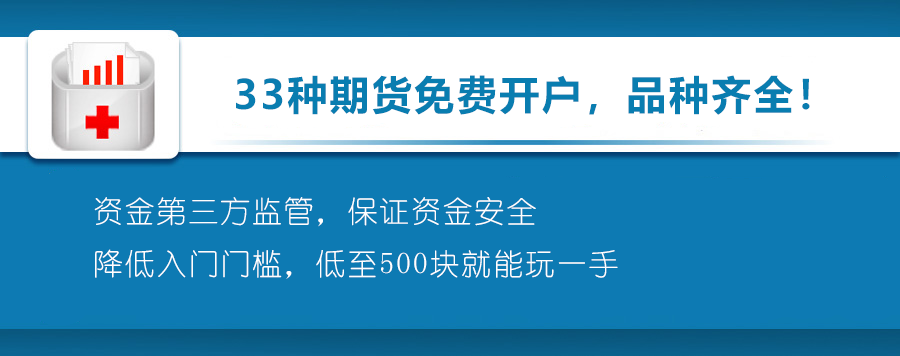
<style>
.page{position:relative;width:900px;height:356px;background:#0d7ab3}
.page>*{position:absolute;margin:0}
.t1{font:40px "MicrosoftYaHei-Bold";letter-spacing:0.06em;color:#097db0}
.t2{font:30px "YouYuan";letter-spacing:0.06em;color:#ffffff}
</style>
<div class="page">
<p class="t1" style="left:236px;top:75px;width:574px;height:40px">33种期货免费开户，品种齐全！</p>
<p class="t2" style="left:94px;top:197px;width:524px;height:82px">资金第三方监管，保证资金安全<br>降低入门门槛，低至500块就能玩一手</p>
</div>
